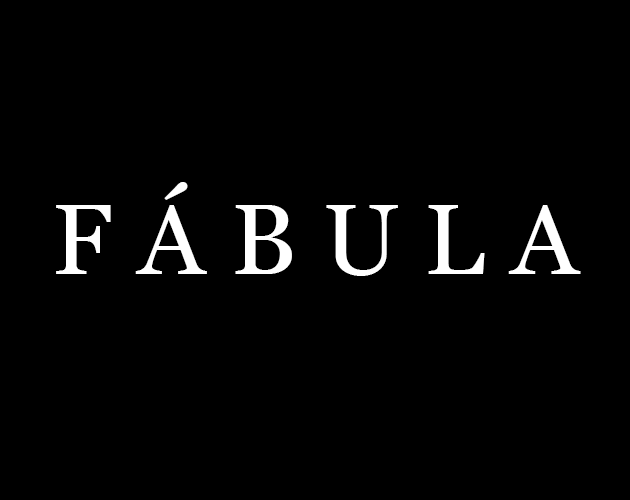
<style>
.page{position:relative;width:630px;height:500px;background:#000000}
.page>*{position:absolute;margin:0}
.t1{font:100px "Georgia";letter-spacing:0.26em;color:#ffffff}
</style>
<div class="page">
<p class="t1" style="left:56px;top:182px;width:525px;height:94px">FÁBULA</p>
</div>
